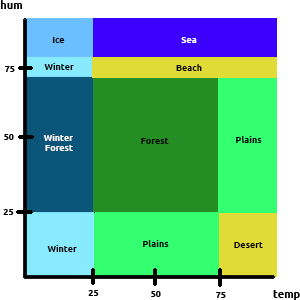
<style>
.page{position:relative;width:300px;height:300px;background:#ffffff}
.page>*{position:absolute;margin:0}
.t1{font:11px "Ubuntu-Bold";color:#000000}
.t2{font:9px "Ubuntu-Bold";color:#000000}
.t3{font:9px "Ubuntu-Bold";color:#ffffff}
</style>
<div class="page">
<p class="t1" style="left:0px;top:0px;width:23px;height:9px">hum</p>
<p class="t2" style="left:52px;top:37px;width:13px;height:6px">Ice</p>
<p class="t3" style="left:181px;top:37px;width:16px;height:6px">Sea</p>
<p class="t2" style="left:44px;top:63px;width:30px;height:7px">Winter</p>
<p class="t2" style="left:176px;top:64px;width:26px;height:7px">Beach</p>
<p class="t2" style="left:5px;top:66px;width:10px;height:6px">75</p>
<p class="t2" style="left:4px;top:134px;width:10px;height:6px">50</p>
<p class="t3" style="left:43px;top:134px;width:30px;height:17px">Winter<br>Forest</p>
<p class="t2" style="left:236px;top:136px;width:26px;height:7px">Plains</p>
<p class="t2" style="left:141px;top:138px;width:28px;height:6px">Forest</p>
<p class="t2" style="left:3px;top:209px;width:11px;height:6px">25</p>
<p class="t2" style="left:47px;top:245px;width:30px;height:7px">Winter</p>
<p class="t2" style="left:143px;top:240px;width:26px;height:7px">Plains</p>
<p class="t2" style="left:234px;top:242px;width:29px;height:6px">Desert</p>
<p class="t2" style="left:88px;top:290px;width:11px;height:6px">25</p>
<p class="t2" style="left:151px;top:291px;width:10px;height:6px">50</p>
<p class="t2" style="left:216px;top:292px;width:10px;height:6px">75</p>
<p class="t1" style="left:273px;top:290px;width:27px;height:10px">temp</p>
</div>
